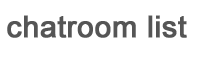
<style>
.page{position:relative;width:200px;height:60px;background:#ffffff}
.page>*{position:absolute;margin:0}
.t1{font:30px "ArialMT";color:#555555;font-weight:bold}
</style>
<div class="page">
<p class="t1" style="left:7px;top:15px;width:180px;height:23px">chatroom list</p>
</div>
